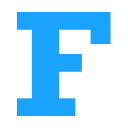
<style>
.page{position:relative;width:128px;height:128px;background:#ffffff}
.page>*{position:absolute;margin:0}
.t1{font:141.7px "Rockwell-Bold";color:#1aa4ff}
</style>
<div class="page">
<p class="t1" style="left:16px;top:12px;width:95px;height:104px">F</p>
</div>
